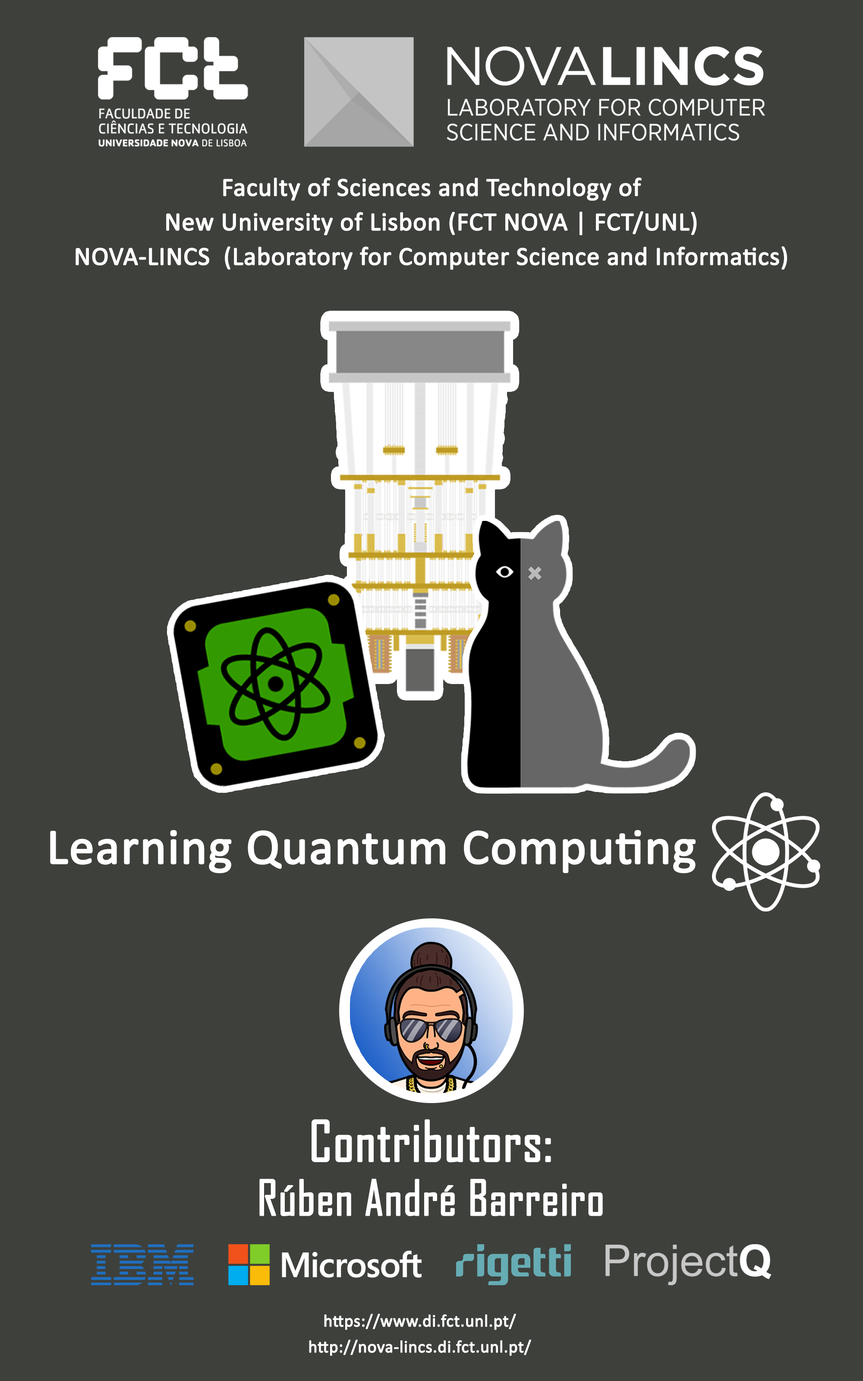
<style>
.page{position:relative;width:863px;height:1381px;background:#3e403c}
.page>*{position:absolute;margin:0}
.t1{font:25.9px/34.5px "Calibri";color:#ffffff;font-weight:bold}
.t2{font:50.4px "Calibri";color:#ffffff;font-weight:bold}
.t3{font:46.8px/54px "AgencyFB-Reg";color:#ffffff;font-weight:bold}
.t4{font:54px/69.1px "AgencyFB-Reg";color:#ffffff;font-weight:bold}
.t5{font:17.3px/25.9px "Calibri";color:#ffffff;font-weight:bold}
</style>
<div class="page">
<p class="t1" style="left:76px;top:177px;width:711px;height:93px;text-align:center">Faculty of Sciences and Technology of <br>New University of Lisbon (FCT NOVA | FCT/UNL)<br>NOVA-LINCS  (Laboratory for Computer Science and Informatics)</p>
<p class="t2" style="left:50px;top:830px;width:646px;height:44px">Learning Quantum Computing</p>
<p class="t3" style="left:259px;top:1119px;width:344px;height:97px;text-align:center"><span class="t4">Contributors:<br></span>Rúben André Barreiro</p>
<p class="t5" style="left:309px;top:1314px;width:222px;height:42px;text-align:center">https://www.di.fct.unl.pt/<br>http://nova-lincs.di.fct.unl.pt/</p>
</div>
